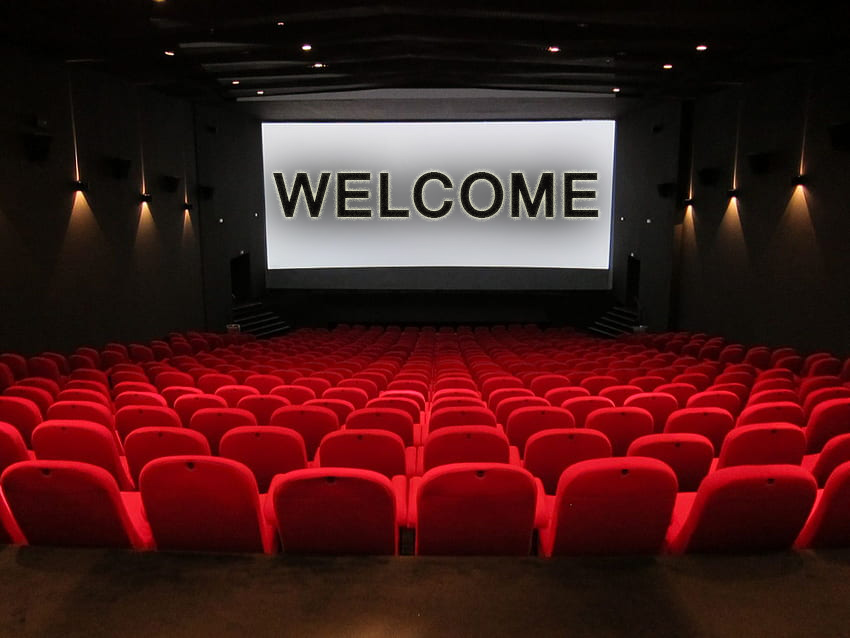
<style>
.page{position:relative;width:850px;height:638px}
.page>*{position:absolute;margin:0}
.t1{font:60px "Mangal-Bold";color:#2c2323}
.t2{font:80px "Mangal";color:#1f1c1c}
</style>
<div class="page">
<p class="t1" style="left:273px;top:172px;width:326px;height:46px"><span class="t2"><br>        </span>WELCOME</p>
</div>
